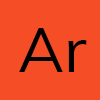
<style>
.page{position:relative;width:100px;height:100px;background:#f54e27}
.page>*{position:absolute;margin:0}
.t1{font:62.5px "Muli-Regular";color:#000000}
</style>
<div class="page">
<p class="t1" style="left:19px;top:28px;width:68px;height:44px">Ar</p>
</div>
